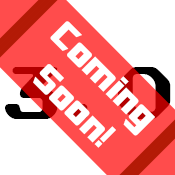
<style>
.page{position:relative;width:175px;height:175px;background:#ffffff}
.page>*{position:absolute;margin:0}
.t1{font:36px "SFTransRobotics";color:#ffffff}
</style>
<div class="page">
<p class="t1" style="left:33px;top:21px;width:122px;height:127px;text-align:center;rotate:45deg">Coming<br>Soon!</p>
</div>
